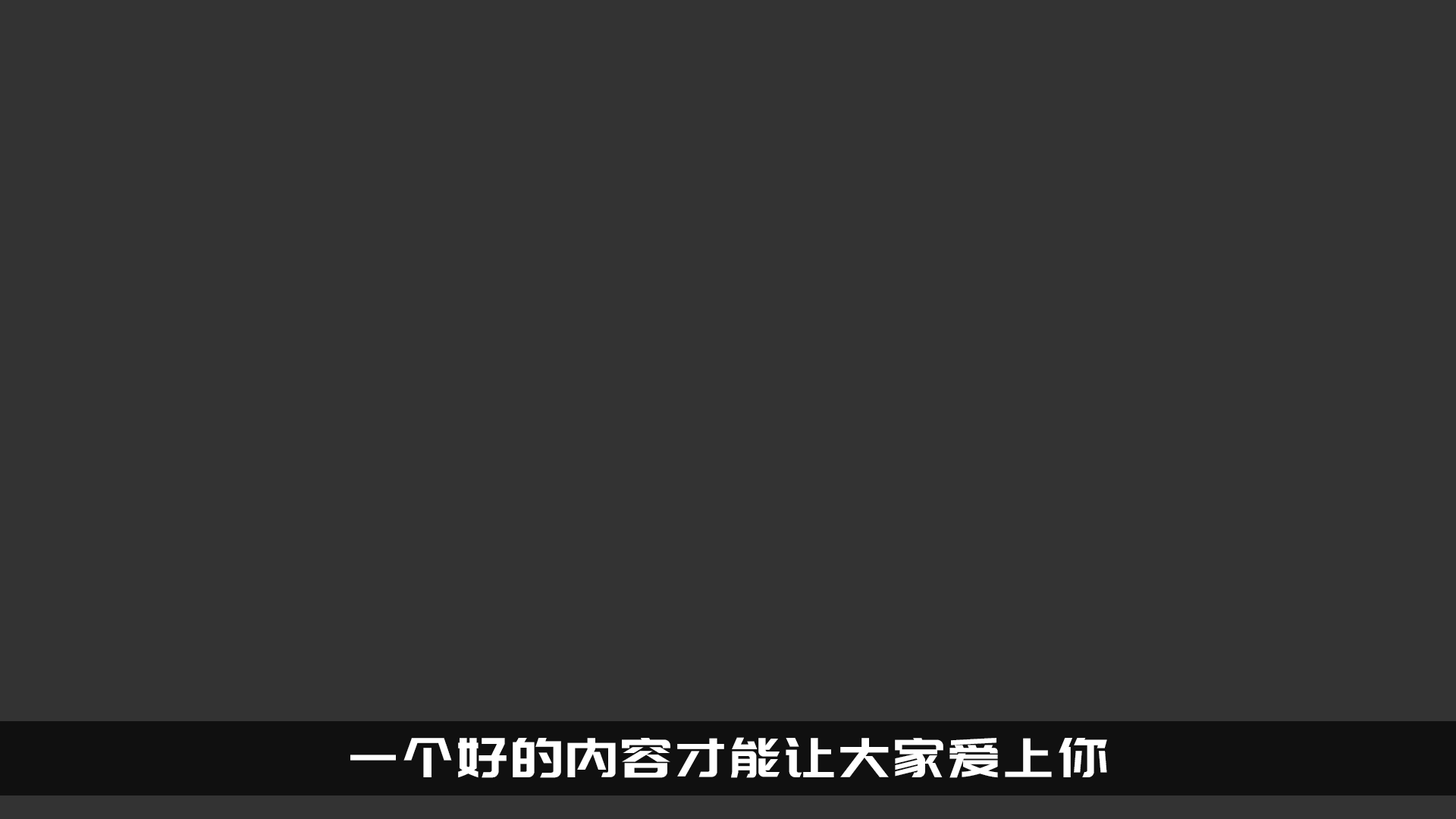
<style>
.page{position:relative;width:1456px;height:819px;background:#333333}
.page>*{position:absolute;margin:0}
.t1{font:54.6px "PangMenZhengDao-3";color:#ffffff}
</style>
<div class="page">
<p class="t1" style="left:350px;top:737px;width:757px;height:41px">一个好的内容才能让大家爱上你</p>
</div>
